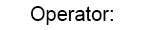
<style>
.page{position:relative;width:150px;height:30px;background:#ffffff}
.page>*{position:absolute;margin:0}
.t1{font:20px "ArialMT";color:#000000}
</style>
<div class="page">
<p class="t1" style="left:30px;top:6px;width:83px;height:19px">Operator:</p>
</div>
